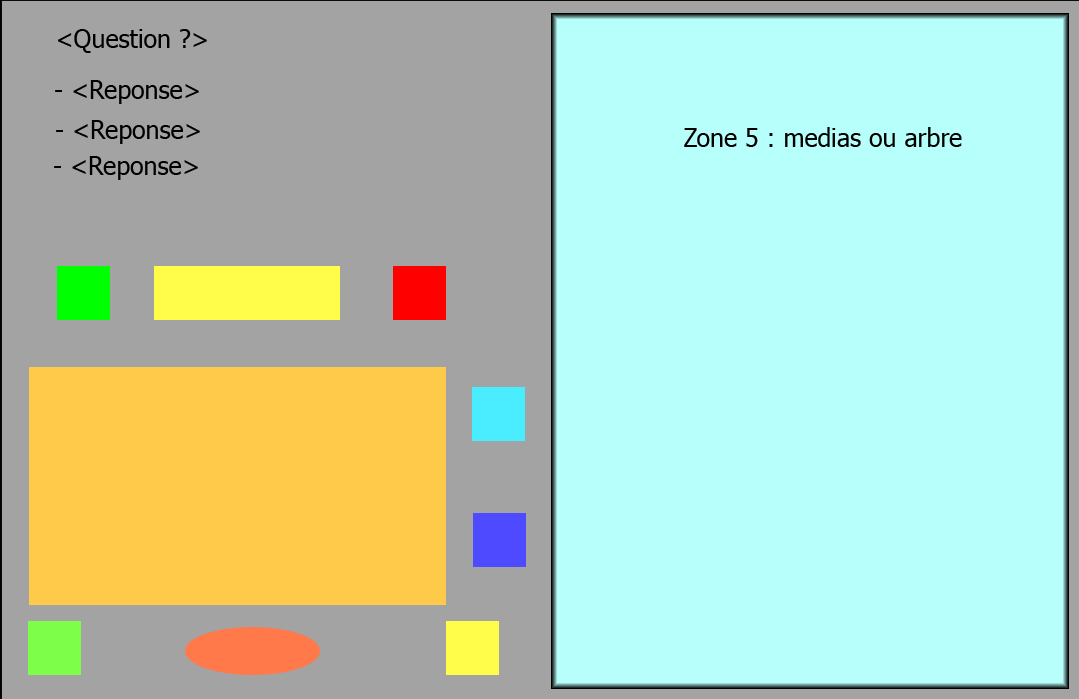
<style>
.page{position:relative;width:1079px;height:699px;background:#b7fffb}
.page>*{position:absolute;margin:0}
.t1{font:25px "Tahoma";color:#000000}
</style>
<div class="page">
<p class="t1" style="left:58px;top:29px;width:149px;height:24px">&lt;Question ?&gt;</p>
<p class="t1" style="left:55px;top:80px;width:144px;height:24px">- &lt;Reponse&gt;</p>
<p class="t1" style="left:56px;top:120px;width:144px;height:24px">- &lt;Reponse&gt;</p>
<p class="t1" style="left:684px;top:127px;width:278px;height:20px">Zone 5 : medias ou arbre</p>
<p class="t1" style="left:54px;top:156px;width:144px;height:24px">- &lt;Reponse&gt;</p>
</div>
